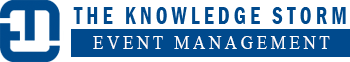
<style>
.page{position:relative;width:350px;height:62px;background:#ffffff}
.page>*{position:absolute;margin:0}
.t1{font:24.8px "FranklinGothic-DemiCond";letter-spacing:0.2em;color:#004a8d;scale:0.84 1}
.t2{font:20.4px "TimesNewRomanPSMT";letter-spacing:0.2em;color:#ffffff;scale:0.84 1}
</style>
<div class="page">
<p class="t1" style="left:73px;top:7px;width:273px;height:17px">THE KNOWLEDGE STORM</p>
<p class="t2" style="left:93px;top:36px;width:237px;height:13px">EVENT MANAGEMENT</p>
</div>
